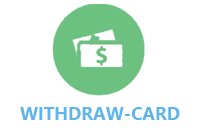
<style>
.page{position:relative;width:205px;height:138px;background:#ffffff}
.page>*{position:absolute;margin:0}
.t1{font:18px "NirmalaUI-Bold";color:#5eb5ea}
</style>
<div class="page">
<p class="t1" style="left:20px;top:107px;width:160px;height:13px">WITHDRAW-CARD</p>
</div>
